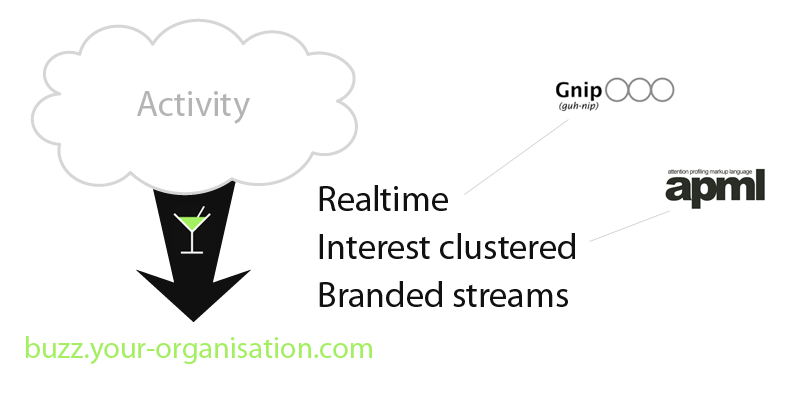
<style>
.page{position:relative;width:789px;height:412px;background:#ffffff}
.page>*{position:absolute;margin:0}
.t1{font:36px "MyriadPro-Regular";color:#b4b4b4}
.t2{font:36px/48px "MyriadPro-Regular";color:#111111}
.t3{font:30px "MyriadPro-Regular";color:#a3ef61}
</style>
<div class="page">
<p class="t1" style="left:137px;top:91px;width:113px;height:33px">Activity</p>
<p class="t2" style="left:319px;top:185px;width:256px;height:122px">Realtime<br>Interest clustered<br>Branded streams</p>
<p class="t3" style="left:26px;top:336px;width:346px;height:29px">buzz.your-organisation.com</p>
</div>
